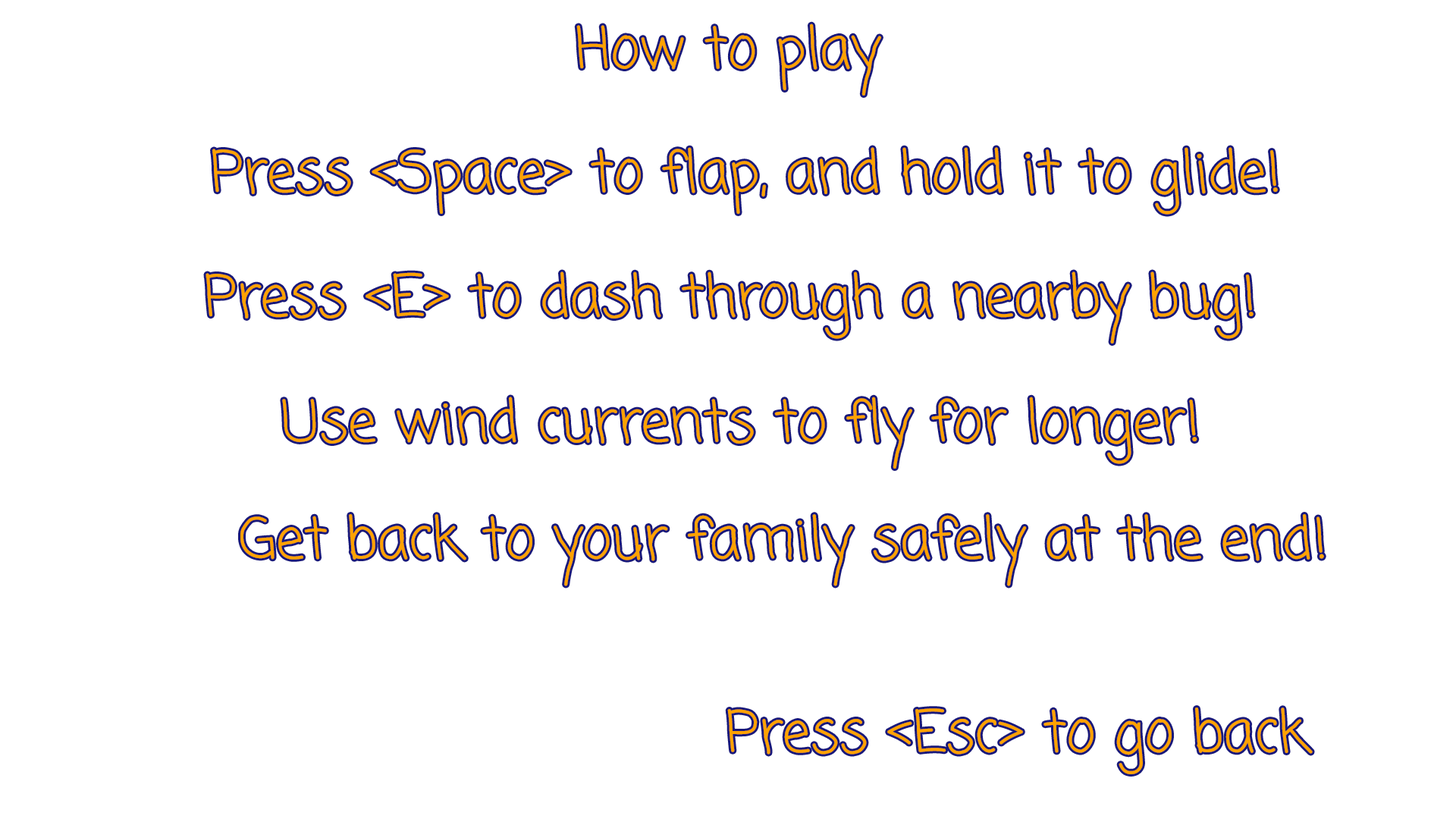
<style>
.page{position:relative;width:1456px;height:819px;background:#ffffff}
.page>*{position:absolute;margin:0}
.t1{font:56.9px "ComingSoon-Regular";color:#ffa200}
</style>
<div class="page">
<p class="t1" style="left:576px;top:24px;width:305px;height:72px">How to play</p>
<p class="t1" style="left:212px;top:147px;width:1066px;height:68px">Press &lt;Space&gt; to flap, and hold it to glide!</p>
<p class="t1" style="left:206px;top:271px;width:1048px;height:73px">Press &lt;E&gt; to dash through a nearby bug!</p>
<p class="t1" style="left:282px;top:397px;width:915px;height:72px">Use wind currents to fly for longer!</p>
<p class="t1" style="left:240px;top:514px;width:1084px;height:72px">Get back to your family safely at the end!</p>
<p class="t1" style="left:727px;top:708px;width:586px;height:66px">Press &lt;Esc&gt; to go back</p>
</div>
